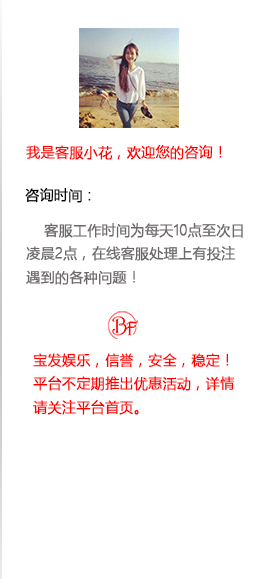
<style>
.page{position:relative;width:270px;height:579px;background:#ffffff}
.page>*{position:absolute;margin:0}
.t1{font:14px "MicrosoftYaHeiLight";color:#fe0000;font-weight:bold}
.t2{font:14px "MicrosoftYaHeiLight";color:#030101;font-weight:bold}
.t3{font:14px/23.5px "MicrosoftYaHeiLight";color:#6e6969;font-weight:bold}
.t4{font:14px/23.5px "MicrosoftYaHeiLight";color:#ff0000;font-weight:bold}
</style>
<div class="page">
<p class="t1" style="left:26px;top:145px;width:196px;height:15px">我是客服小花，欢迎您的咨询！</p>
<p class="t2" style="left:25px;top:188px;width:66px;height:15px">咨询时间：</p>
<p class="t3" style="left:26px;top:223px;width:217px;height:62px">客服工作时间为每天10点至次日<br>凌晨2点，在线客服处理上有投注<br>遇到的各种问题！</p>
<p class="t4" style="left:33px;top:353px;width:202px;height:62px">宝发娱乐，信誉，安全，稳定！<br>平台不定期推出优惠活动，详情<br>请关注平台首页。</p>
</div>
